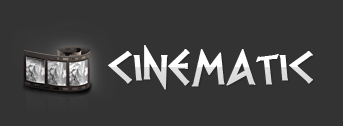
<style>
.page{position:relative;width:343px;height:126px;background:#333333}
.page>*{position:absolute;margin:0}
.t1{font:47px "DSGreece";text-transform:uppercase;font-weight:bold}
</style>
<div class="page">
<p class="t1" style="left:108px;top:45px;width:205px;height:45px">cinematic</p>
</div>
